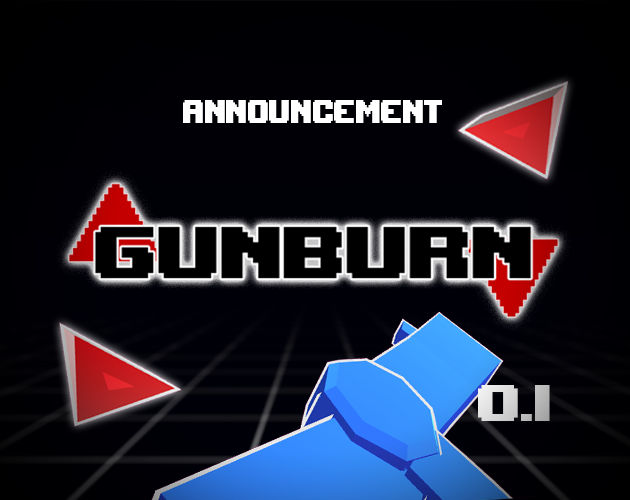
<style>
.page{position:relative;width:630px;height:500px}
.page>*{position:absolute;margin:0}
.t1{font:45.9px "UpheavalPro-Regular";color:#ffffff;scale:0.78 1}
.t2{font:72px "UpheavalPro-Regular"}
</style>
<div class="page">
<p class="t1" style="left:183px;top:100px;width:259px;height:23px">announcement</p>
<p class="t2" style="left:478px;top:385px;width:72px;height:36px">0.1</p>
</div>
